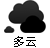
<style>
.page{position:relative;width:50px;height:48px;background:#ffffff}
.page>*{position:absolute;margin:0}
.t1{font:12px "OPPOSans-R";color:#000000}
</style>
<div class="page">
<p class="t1" style="left:14px;top:36px;width:22px;height:11px">多云</p>
</div>
